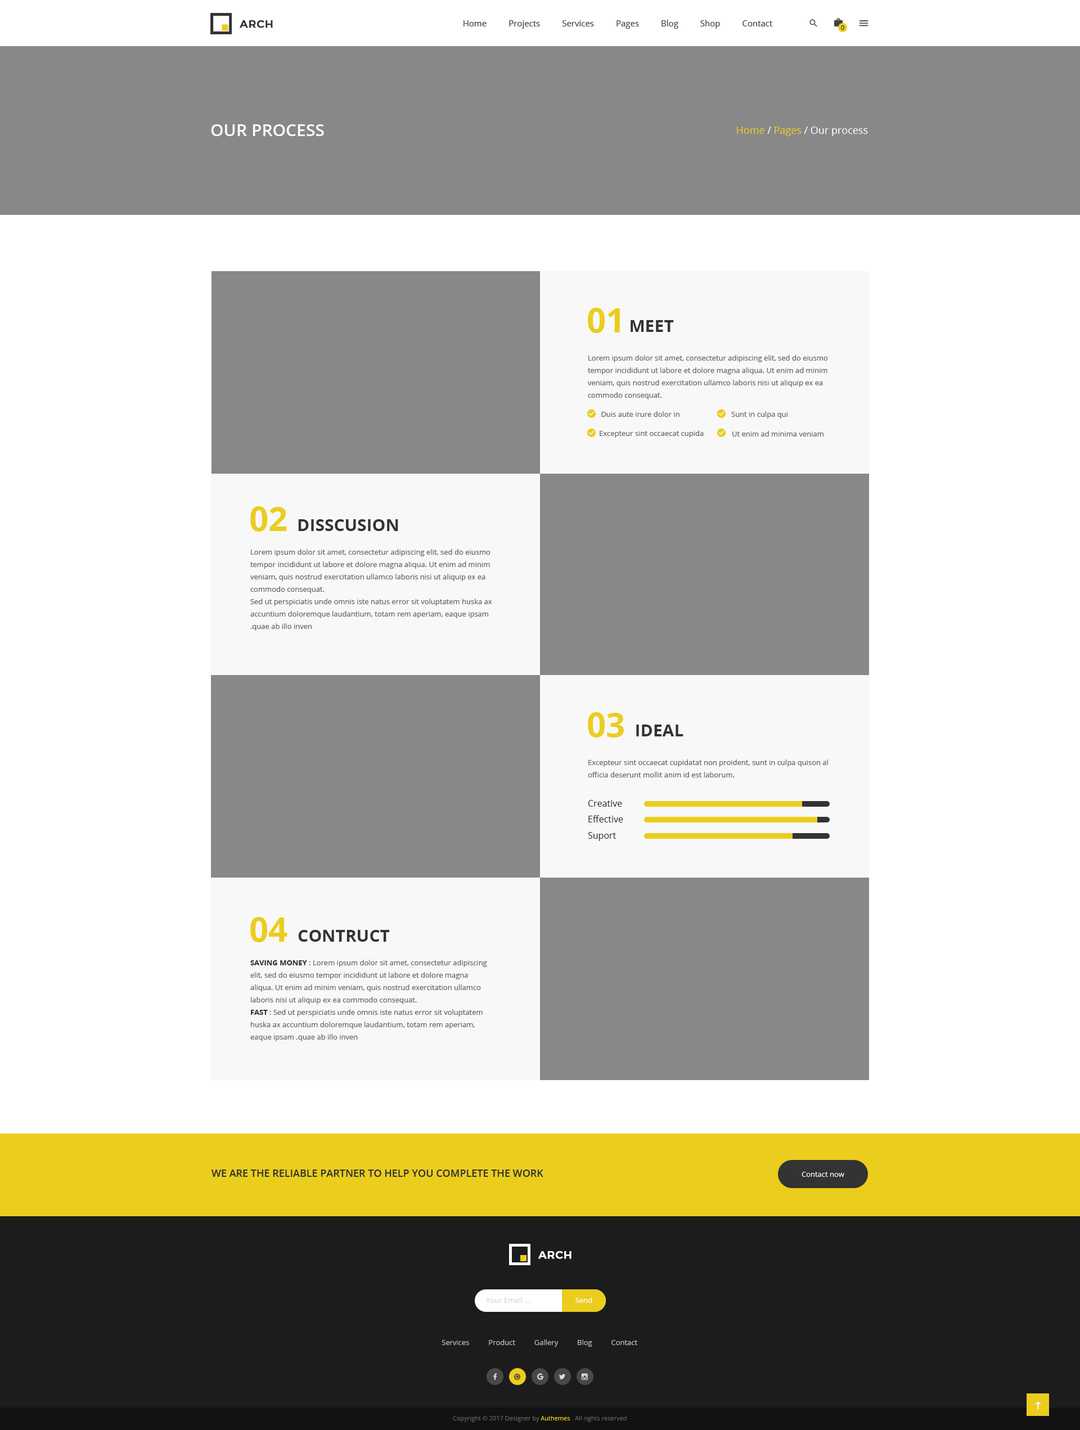
<style>
.page{position:relative;width:1080px;height:1430px;background:#ffffff}
.page>*{position:absolute;margin:0}
.t1{font:10.7px "Montserrat-Medium";letter-spacing:0.025em;color:#333333;text-transform:uppercase;font-weight:bold}
.t2{font:8.4px "OpenSans";color:#444444}
.t3{font:6.2px "OpenSans";color:#333333}
.t4{font:16.9px "OpenSans-Semibold";color:#ffffff;text-transform:uppercase}
.t5{font:10.1px "OpenSans-Regular";color:#ffffff}
.t6{font:10.1px "OpenSans-Regular";color:#ebcd1e}
.t7{font:33.8px "OpenSans-Bold";color:#ebcd1e;text-transform:uppercase}
.t8{font:16.9px "OpenSans-Bold";color:#333333;text-transform:uppercase}
.t9{font:7.3px/12.4px "OpenSans";color:#666666}
.t10{font:7.3px "OpenSans";color:#666666}
.t11{font:9px "OpenSans";color:#333333}
.t12{font:7.3px/12.4px "OpenSans-Bold";color:#333333}
.t13{font:10.1px "OpenSans-Semibold";color:#333333;text-transform:uppercase}
.t14{font:7.3px "OpenSans";color:#ffffff}
.t15{font:10.7px "Montserrat-Medium";letter-spacing:0.025em;color:#ffffff;text-transform:uppercase;font-weight:bold}
.t16{font:7.3px "OpenSans";color:#d6d6d6}
.t17{font:7.3px "OpenSans";color:#c2c2c2}
.t18{font:6.2px "OpenSans";color:#626262}
.t19{font:6.2px "OpenSans";color:#ebcd1e}
</style>
<div class="page">
<p class="t1" style="left:240px;top:20px;width:33px;height:8px">arch</p>
<p class="t2" style="left:464px;top:20px;width:309px;height:9px">Home          Projects          Services          Pages          Blog          Shop          Contact</p>
<p class="t3" style="left:841px;top:25px;width:3px;height:5px">0</p>
<p class="t4" style="left:211px;top:124px;width:113px;height:12px">our process</p>
<p class="t5" style="left:737px;top:127px;width:131px;height:9px"><span class="t6">Home </span>/<span class="t6"> Pages </span>/ Our process</p>
<p class="t7" style="left:588px;top:308px;width:32px;height:25px">01</p>
<p class="t8" style="left:631px;top:320px;width:43px;height:12px">meet</p>
<p class="t9" style="left:588px;top:355px;width:240px;height:44px">Lorem ipsum dolor sit amet, consectetur adipiscing elit, sed do eiusmo tempor incididunt ut labore et dolore magna aliqua. Ut enim ad minim veniam, quis nostrud exercitation ullamco laboris nisi ut aliquip ex ea commodo consequat.</p>
<p class="t10" style="left:601px;top:411px;width:79px;height:6px">Duis aute irure dolor in</p>
<p class="t10" style="left:731px;top:411px;width:57px;height:7px">Sunt in culpa qui</p>
<p class="t10" style="left:600px;top:430px;width:104px;height:8px">Excepteur sint occaecat cupida</p>
<p class="t10" style="left:732px;top:431px;width:92px;height:5px">Ut enim ad minima veniam</p>
<p class="t7" style="left:250px;top:506px;width:37px;height:26px">02</p>
<p class="t8" style="left:298px;top:519px;width:100px;height:12px">disscusion</p>
<p class="t9" style="left:250px;top:549px;width:242px;height:82px">Lorem ipsum dolor sit amet, consectetur adipiscing elit, sed do eiusmo tempor incididunt ut labore et dolore magna aliqua. Ut enim ad minim veniam, quis nostrud exercitation ullamco laboris nisi ut aliquip ex ea commodo consequat.<br>Sed ut perspiciatis unde omnis iste natus error sit voluptatem huska ax accuntium doloremque laudantium, totam rem aperiam, eaque ipsam .quae ab illo inven</p>
<p class="t7" style="left:588px;top:712px;width:36px;height:25px">03</p>
<p class="t8" style="left:636px;top:724px;width:47px;height:12px">ideal</p>
<p class="t9" style="left:588px;top:759px;width:240px;height:18px">Excepteur sint occaecat cupidatat non proident, sunt in culpa quison al officia deserunt mollit anim id est laborum.</p>
<p class="t11" style="left:588px;top:800px;width:34px;height:7px">Creative</p>
<p class="t11" style="left:588px;top:815px;width:35px;height:7px">Effective</p>
<p class="t11" style="left:588px;top:832px;width:28px;height:9px">Suport</p>
<p class="t7" style="left:250px;top:917px;width:37px;height:25px">04</p>
<p class="t8" style="left:298px;top:930px;width:92px;height:12px">contruct</p>
<p class="t9" style="left:250px;top:960px;width:237px;height:81px"><span class="t12">SAVING MONEY</span> : Lorem ipsum dolor sit amet, consectetur adipiscing elit, sed do eiusmo tempor incididunt ut labore et dolore magna aliqua. Ut enim ad minim veniam, quis nostrud exercitation ullamco laboris nisi ut aliquip ex ea commodo consequat.<br><span class="t12">FAST</span> : Sed ut perspiciatis unde omnis iste natus error sit voluptatem huska ax accuntium doloremque laudantium, totam rem aperiam, eaque ipsam .quae ab illo inven</p>
<p class="t13" style="left:212px;top:1169px;width:331px;height:8px">We are the reliable partner to help you complete the work</p>
<p class="t14" style="left:802px;top:1172px;width:42px;height:5px">Contact now</p>
<p class="t15" style="left:538px;top:1251px;width:34px;height:8px">arch</p>
<p class="t16" style="left:486px;top:1297px;width:44px;height:6px">Your Email ...</p>
<p class="t14" style="left:575px;top:1297px;width:17px;height:6px">Send</p>
<p class="t17" style="left:442px;top:1339px;width:195px;height:8px">Services          Product          Gallery          Blog          Contact</p>
<p class="t18" style="left:453px;top:1416px;width:174px;height:6px">Copyright © 2017 Designer by <span class="t19">Authemes </span>. All rights reserved</p>
</div>
